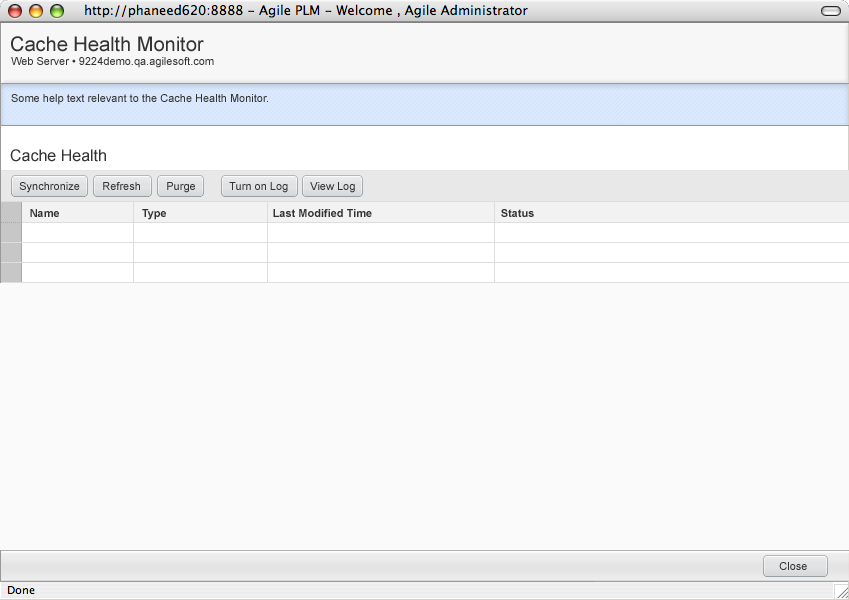
<style>
.page{position:relative;width:849px;height:600px;background:#fafafa}
.page>*{position:absolute;margin:0}
.t1{font:20px "ArialMT";color:#333333}
.t2{font:11px "ArialMT";color:#333333}
.t3{font:16px "ArialMT";color:#333333}
.t4{font:11px "Arial-BoldMT";color:#333333}
</style>
<div class="page">
<p class="t1" style="left:11px;top:36px;width:193px;height:16px">Cache Health Monitor</p>
<p class="t2" style="left:11px;top:57px;width:203px;height:11px">Web Server • 9224demo.qa.agilesoft.com</p>
<p class="t2" style="left:11px;top:94px;width:257px;height:11px">Some help text relevant to the Cache Health Monitor.</p>
<p class="t3" style="left:10px;top:149px;width:96px;height:13px">Cache Health</p>
<p class="t2" style="left:19px;top:182px;width:61px;height:11px">Synchronize</p>
<p class="t2" style="left:103px;top:182px;width:37px;height:8px">Refresh</p>
<p class="t2" style="left:167px;top:182px;width:28px;height:11px">Purge</p>
<p class="t2" style="left:229px;top:182px;width:59px;height:11px">Turn on Log</p>
<p class="t2" style="left:310px;top:182px;width:45px;height:11px">View Log</p>
<p class="t4" style="left:30px;top:209px;width:29px;height:8px">Name</p>
<p class="t4" style="left:142px;top:209px;width:24px;height:11px">Type</p>
<p class="t4" style="left:273px;top:209px;width:99px;height:8px">Last Modified Time</p>
<p class="t4" style="left:501px;top:209px;width:33px;height:8px">Status</p>
<p class="t2" style="left:779px;top:562px;width:28px;height:8px">Close</p>
</div>
